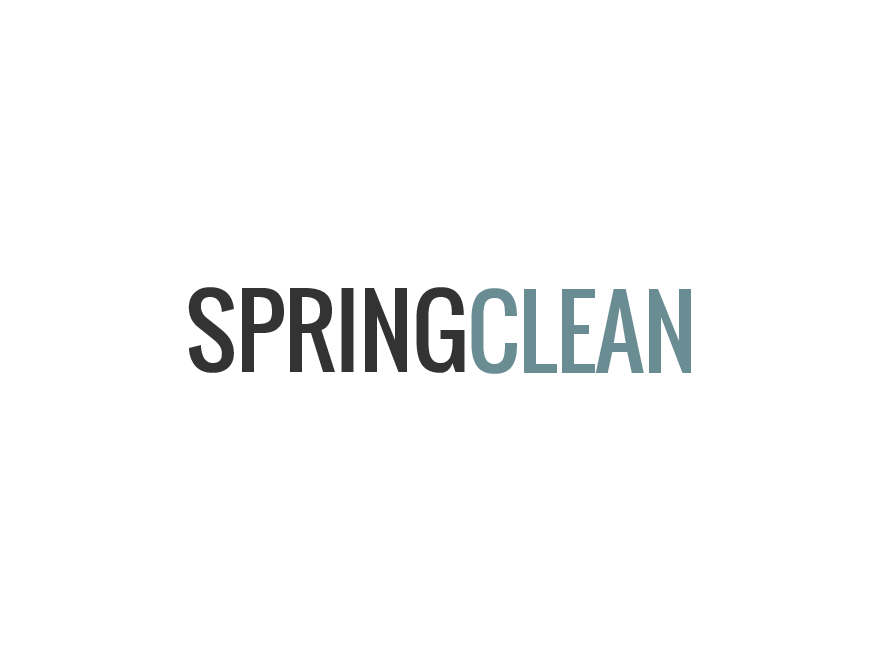
<style>
.page{position:relative;width:880px;height:660px;background:#ffffff}
.page>*{position:absolute;margin:0}
.t1{font:96px "Oswald-Regular";letter-spacing:-0.01em;color:#333333;text-transform:uppercase}
.t2{font:96px "Oswald-Regular";letter-spacing:-0.01em;color:#6a8d94;text-transform:uppercase}
</style>
<div class="page">
<p class="t1" style="left:188px;top:287px;width:277px;height:86px">Spring</p>
<p class="t2" style="left:471px;top:288px;width:220px;height:86px">Clean</p>
</div>
